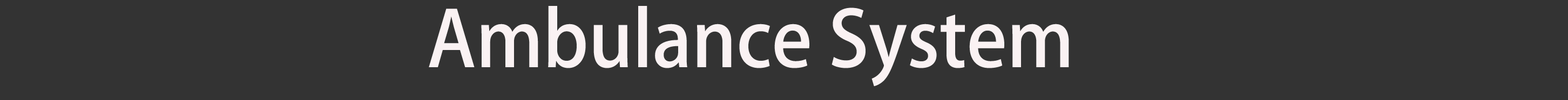
<style>
.page{position:relative;width:1568px;height:100px;background:#333333}
.page>*{position:absolute;margin:0}
.t1{font:76.6px "AdobeFanHeitiStd-Bold";color:#faf2f3;scale:0.97 1}
</style>
<div class="page">
<p class="t1" style="left:429px;top:6px;width:640px;height:81px">Ambulance System</p>
</div>
